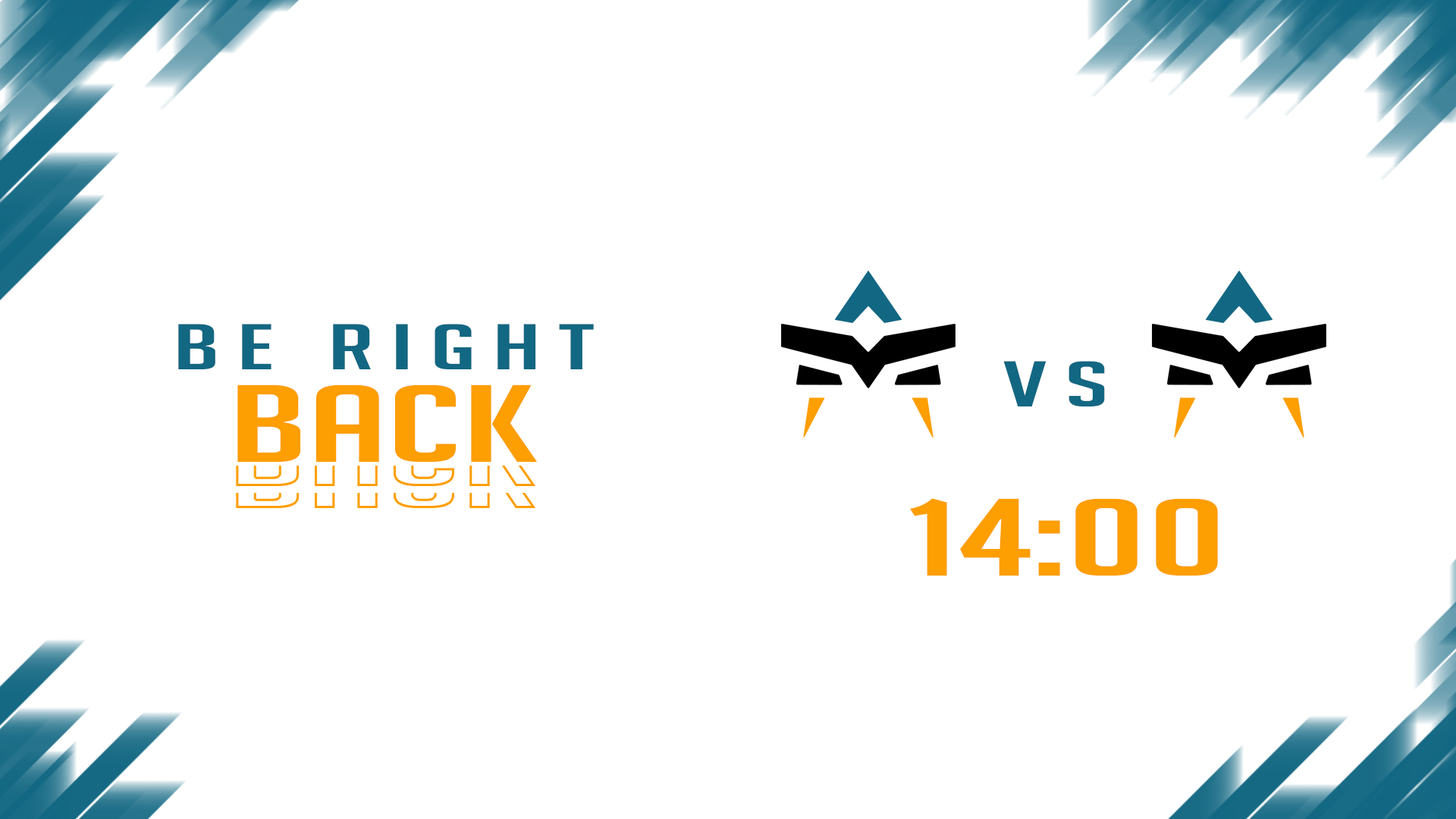
<style>
.page{position:relative;width:1456px;height:819px;background:#ffffff}
.page>*{position:absolute;margin:0}
.t1{font:62.8px "BigNoodleTitling";letter-spacing:0.14em;color:#126782;scale:1.94 1}
.t2{font:106.9px "BigNoodleTitling";color:#fd9e02;scale:1.94 1}
</style>
<div class="page">
<p class="t1" style="left:178px;top:324px;width:416px;height:45px">BE RIGHT</p>
<p class="t1" style="left:1003px;top:361px;width:102px;height:45px">VS</p>
<p class="t2" style="left:237px;top:384px;width:301px;height:78px">BACK</p>
<p class="t2" style="left:910px;top:498px;width:308px;height:78px">14:00</p>
</div>
